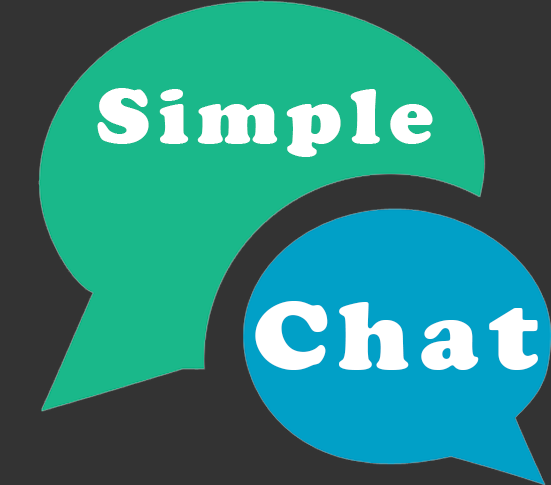
<style>
.page{position:relative;width:551px;height:485px;background:#333333}
.page>*{position:absolute;margin:0}
.t1{font:81.2px "CooperBlack";letter-spacing:0.1em;color:#ffffff;scale:1.03 1}
.t2{font:101.2px "CooperBlack";letter-spacing:0.1em;color:#ffffff;scale:1.03 1}
</style>
<div class="page">
<p class="t1" style="left:97px;top:88px;width:336px;height:69px">Simple</p>
<p class="t2" style="left:255px;top:301px;width:283px;height:69px">Chat</p>
</div>
